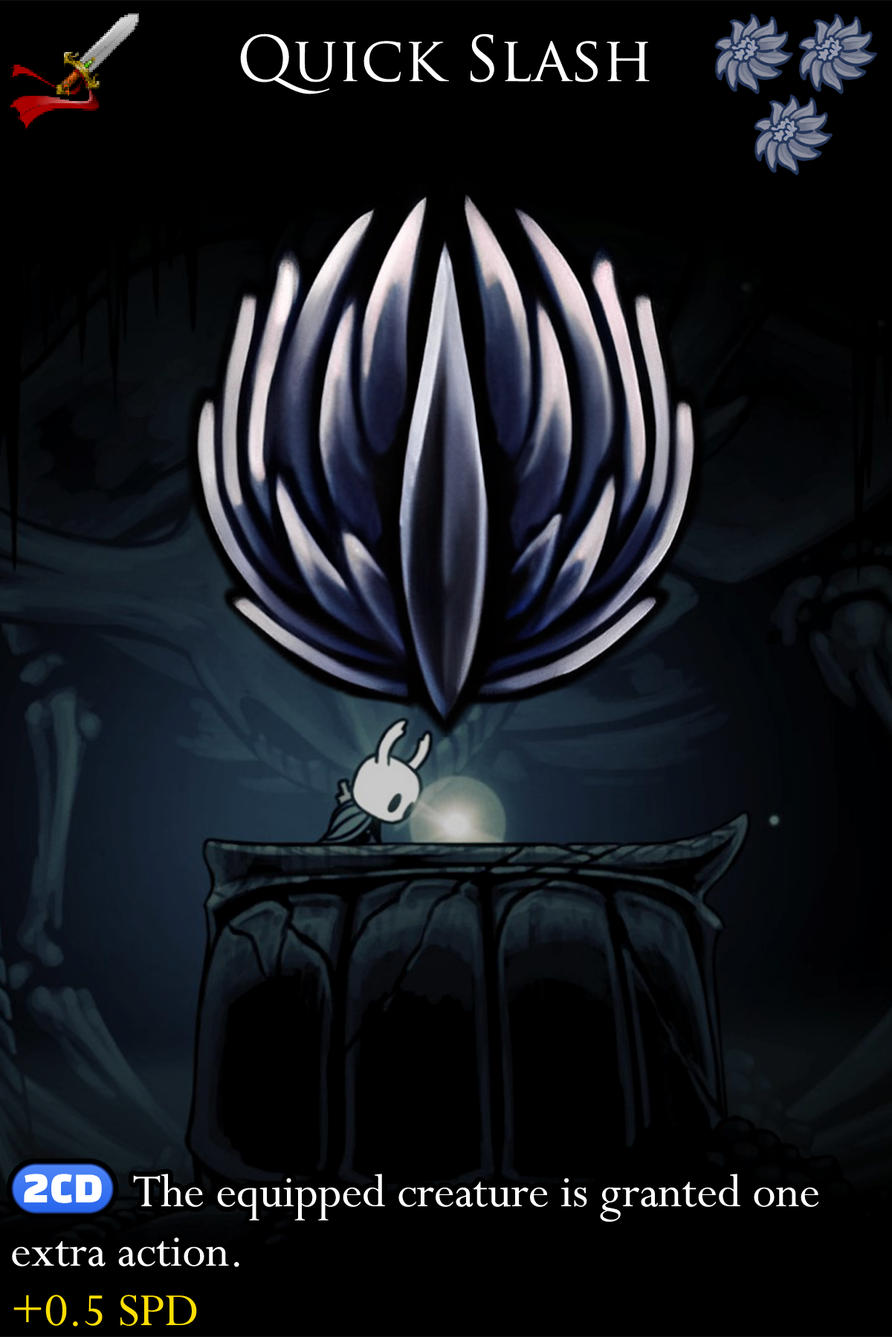
<style>
.page{position:relative;width:892px;height:1337px;background:#000000}
.page>*{position:absolute;margin:0}
.t1{font:104.8px "TrajanPro-Regular";color:#ffffff}
.t2{font:87.7px/59.4px "Perpetua";color:#ffffff}
.t3{font:87.7px/59.4px "stoogedings-Regular";color:#ffffff}
.t4{font:87.7px/59.4px "Perpetua";color:#ffde00}
</style>
<div class="page">
<p class="t1" style="left:240px;top:33px;width:409px;height:61px">Quick Slash</p>
<p class="t2" style="left:11px;top:1164px;width:807px;height:163px"><span class="t3">(2CD) </span>The equipped creature is granted one extra action.<br><span class="t4">+0.5 SPD</span></p>
</div>
